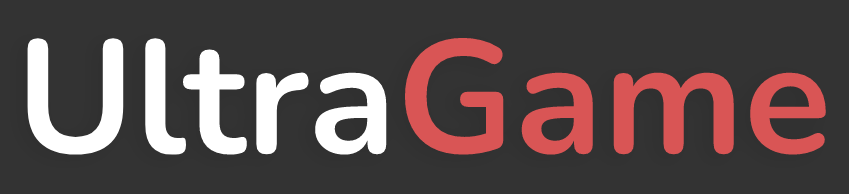
<style>
.page{position:relative;width:849px;height:194px;background:#333333}
.page>*{position:absolute;margin:0}
.t1{font:161px "Nunito-Bold";color:#ffffff}
.t2{font:161px "Nunito-Bold";color:#d95555}
</style>
<div class="page">
<p class="t1" style="left:27px;top:37px;width:799px;height:118px">Ultra<span class="t2">Game</span></p>
</div>
